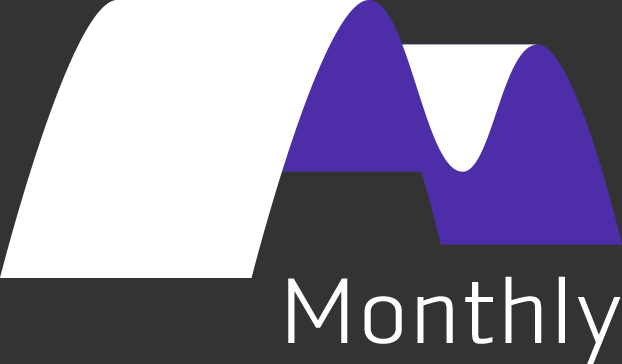
<style>
.page{position:relative;width:622px;height:364px;background:#333333}
.page>*{position:absolute;margin:0}
.t1{font:92px "YDVBlackFit66";letter-spacing:0.04em;color:#ffffff}
</style>
<div class="page">
<p class="t1" style="left:288px;top:276px;width:333px;height:89px">Monthly</p>
</div>
